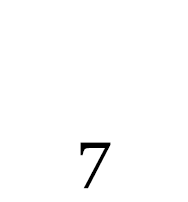
<style>
.page{position:relative;width:188px;height:202px;background:#ffffff}
.page>*{position:absolute;margin:0}
.t1{font:64.7px "Georgia";color:#000000}
</style>
<div class="page">
<p class="t1" style="left:80px;top:142px;width:31px;height:47px">7</p>
</div>
